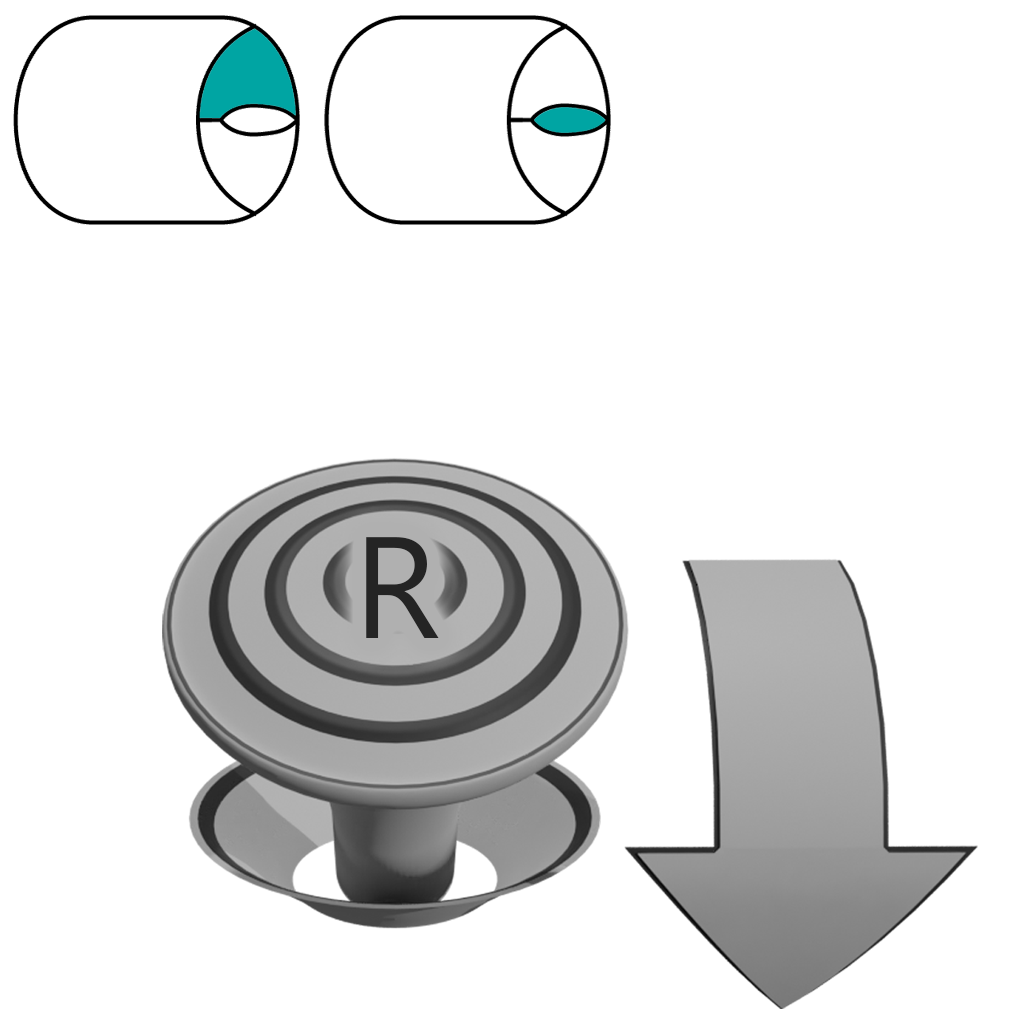
<style>
.page{position:relative;width:1024px;height:1024px;background:#ffffff}
.page>*{position:absolute;margin:0}
.t1{font:144px "MicrosoftPhagsPa";color:#242424}
</style>
<div class="page">
<p class="t1" style="left:366px;top:537px;width:73px;height:101px">R</p>
</div>
